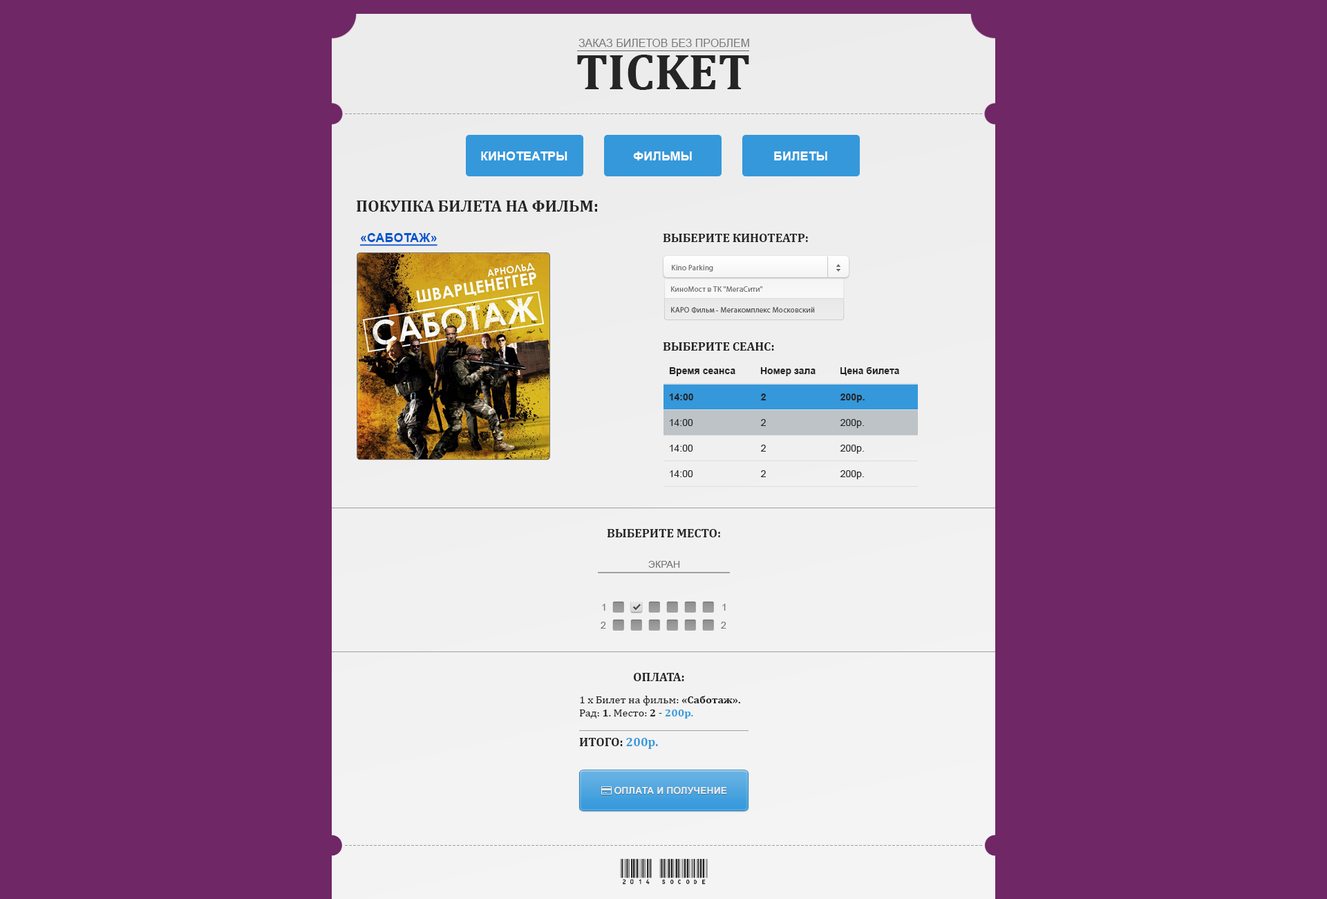
<style>
.page{position:relative;width:1327px;height:899px;background:#6f2766}
.page>*{position:absolute;margin:0}
.t1{font:11.1px "ArialMT";color:#797979;text-transform:uppercase}
.t2{font:50.5px "Cambria-Bold";color:#252525;text-transform:uppercase}
.t3{font:16.6px "Cambria-Bold";color:#252525;text-transform:uppercase}
.t4{font:12.4px "Arial-BoldMT";color:#0055cc;text-transform:uppercase;text-decoration:underline}
.t5{font:12.4px "Cambria-Bold";color:#252525;text-transform:uppercase}
.t6{font:7.6px "MyriadPro-Regular";letter-spacing:0.025em;color:#757575}
.t7{font:7.6px "MyriadPro-Regular";letter-spacing:0.025em;color:#5a5a5a}
.t8{font:9.7px "Arial-BoldMT";color:#252525}
.t9{font:9.7px "ArialMT";color:#252525}
.t10{font:9.7px "ArialMT";color:#777777;text-transform:uppercase}
.t11{font:11.1px "Cambria";color:#252525}
.t12{font:11.1px "Cambria-Bold";color:#252525}
.t13{font:11.1px "Cambria-Bold";color:#3498db;text-transform:uppercase}
.t14{font:11.1px "Cambria-Bold";color:#3498db}
.t15{font:12.4px "Cambria-Bold";color:#3498db;text-transform:uppercase}
.t16{font:12.4px "Cambria-Bold";color:#3498db}
.t17{font:24.9px "C39HrP24DhTt";color:#252525}
</style>
<div class="page">
<p class="t1" style="left:579px;top:39px;width:170px;height:8px">Заказ билетов без проблем</p>
<p class="t2" style="left:577px;top:55px;width:172px;height:35px">TICKET</p>
<p class="t3" style="left:357px;top:200px;width:240px;height:12px">Покупка билета на фильм:</p>
<p class="t4" style="left:360px;top:233px;width:78px;height:13px">«Саботаж»</p>
<p class="t5" style="left:663px;top:234px;width:145px;height:8px">Выберите КИНОТЕАТР:</p>
<p class="t6" style="left:672px;top:265px;width:41px;height:7px">Kino Parking</p>
<p class="t6" style="left:671px;top:286px;width:92px;height:6px">КиноМост в ТК "МегаСити"</p>
<p class="t7" style="left:671px;top:307px;width:144px;height:6px">КАРО Фильм - Мегакомплекс Московский</p>
<p class="t5" style="left:663px;top:342px;width:111px;height:8px">Выберите СЕАНС:</p>
<p class="t8" style="left:669px;top:367px;width:66px;height:9px">Время сеанса</p>
<p class="t8" style="left:760px;top:367px;width:56px;height:9px">Номер зала</p>
<p class="t8" style="left:840px;top:367px;width:59px;height:8px">Цена билета</p>
<p class="t8" style="left:669px;top:393px;width:24px;height:7px">14:00</p>
<p class="t8" style="left:761px;top:393px;width:5px;height:7px">2</p>
<p class="t8" style="left:840px;top:393px;width:25px;height:9px">200р.</p>
<p class="t9" style="left:670px;top:419px;width:23px;height:7px">14:00</p>
<p class="t9" style="left:761px;top:419px;width:5px;height:7px">2</p>
<p class="t9" style="left:840px;top:419px;width:24px;height:9px">200р.</p>
<p class="t9" style="left:670px;top:444px;width:23px;height:7px">14:00</p>
<p class="t9" style="left:761px;top:444px;width:5px;height:7px">2</p>
<p class="t9" style="left:840px;top:444px;width:24px;height:9px">200р.</p>
<p class="t9" style="left:670px;top:470px;width:23px;height:7px">14:00</p>
<p class="t9" style="left:761px;top:470px;width:5px;height:7px">2</p>
<p class="t9" style="left:840px;top:470px;width:24px;height:9px">200р.</p>
<p class="t5" style="left:607px;top:529px;width:113px;height:8px">Выберите МЕСТО:</p>
<p class="t10" style="left:648px;top:561px;width:32px;height:6px">экран</p>
<p class="t10" style="left:602px;top:603px;width:3px;height:7px">1</p>
<p class="t10" style="left:722px;top:603px;width:4px;height:7px">1</p>
<p class="t10" style="left:601px;top:621px;width:5px;height:7px">2</p>
<p class="t10" style="left:721px;top:621px;width:5px;height:7px">2</p>
<p class="t5" style="left:634px;top:673px;width:50px;height:8px">ОПЛАТА:</p>
<p class="t11" style="left:579px;top:695px;width:161px;height:23px">1 x Билет на фильм: <span class="t12">«Саботаж». <br></span>Рад: <span class="t12">1</span>. Место: <span class="t12">2 </span>- <span class="t13">200</span><span class="t14">р.</span></p>
<p class="t5" style="left:579px;top:737px;width:79px;height:12px">Итого: <span class="t15">200</span><span class="t16">р.</span></p>
<p class="t17" style="left:620px;top:858px;width:88px;height:26px">2014 socode</p>
</div>
